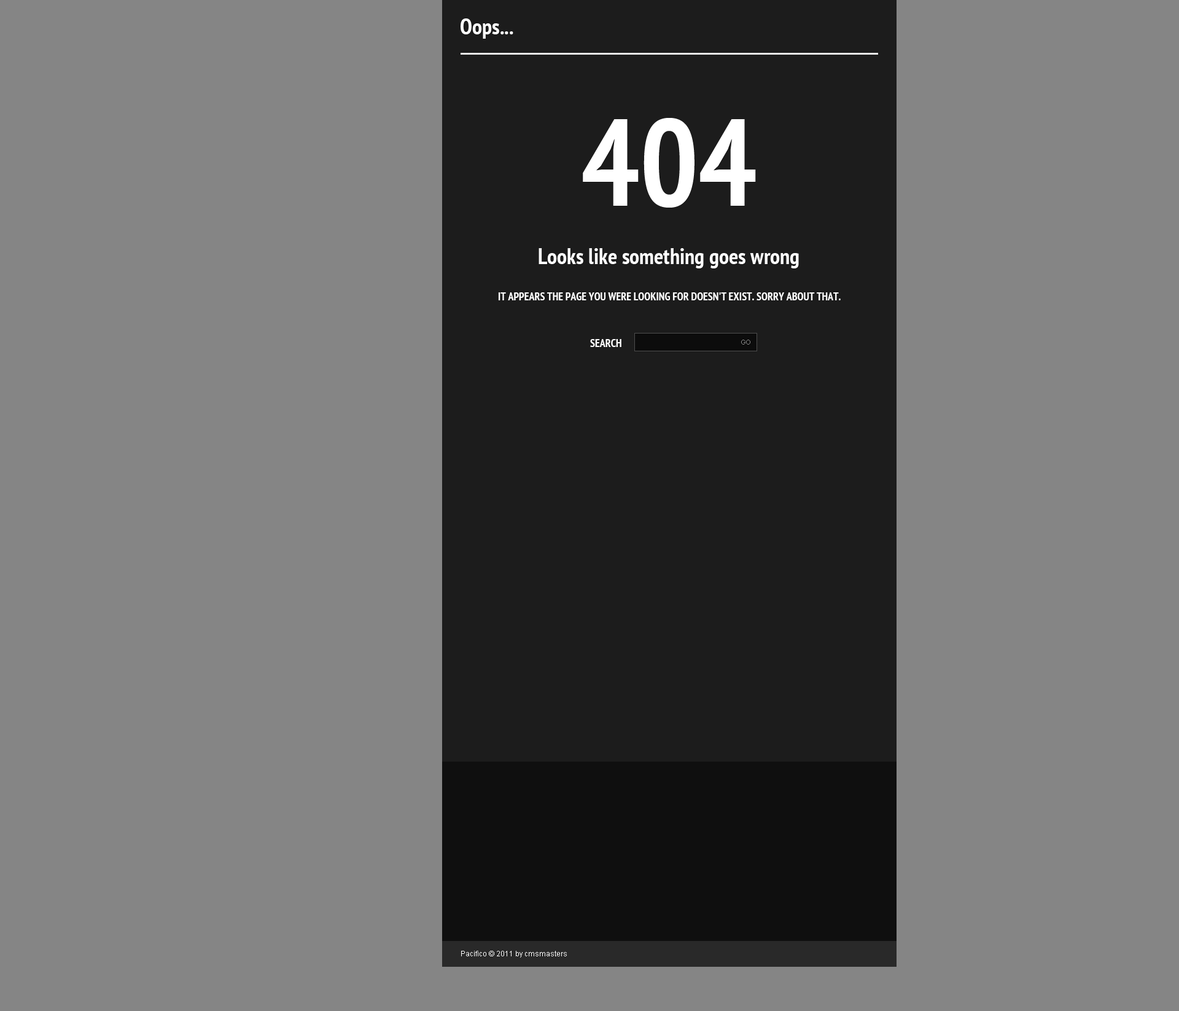
<style>
.page{position:relative;width:1179px;height:1011px;background:#858585}
.page>*{position:absolute;margin:0}
.t1{font:22.1px "PTSans-NarrowBold";color:#ffffff}
.t2{font:122.9px "PTSans-NarrowBold";color:#ffffff}
.t3{font:11.1px "PTSans-NarrowBold";color:#ffffff;text-transform:uppercase}
.t4{font:6.8px "ArialMT";color:#868686}
.t5{font:7.4px "ArialMT";color:#ffffff}
</style>
<div class="page">
<p class="t1" style="left:461px;top:18px;width:53px;height:21px">Oops...</p>
<p class="t2" style="left:583px;top:118px;width:173px;height:90px">404</p>
<p class="t1" style="left:539px;top:248px;width:260px;height:20px">Looks like something goes wrong</p>
<p class="t3" style="left:498px;top:292px;width:343px;height:8px">It appears the page you were looking for doesn't exist. Sorry about that.</p>
<p class="t3" style="left:590px;top:339px;width:32px;height:8px">Search</p>
<p class="t4" style="left:741px;top:340px;width:10px;height:5px">GO</p>
<p class="t5" style="left:461px;top:951px;width:106px;height:7px">Pacifico © 2011 by cmsmasters</p>
</div>
